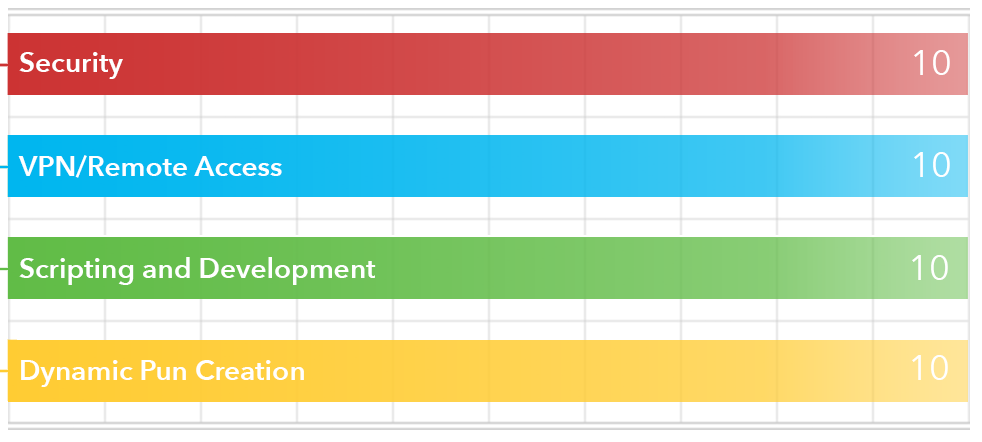
<style>
.page{position:relative;width:982px;height:442px;background:#ffffff}
.page>*{position:absolute;margin:0}
.t1{font:28px "AvenirNext-DemiBold";color:#ffffff}
.t2{font:36px "AvenirNext-Regular";color:#ffffff}
</style>
<div class="page">
<p class="t1" style="left:19px;top:52px;width:104px;height:27px">Security</p>
<p class="t2" style="left:914px;top:50px;width:36px;height:25px">10</p>
<p class="t1" style="left:18px;top:155px;width:264px;height:23px">VPN/Remote Access</p>
<p class="t2" style="left:914px;top:152px;width:36px;height:25px">10</p>
<p class="t1" style="left:19px;top:257px;width:357px;height:28px">Scripting and Development</p>
<p class="t2" style="left:912px;top:255px;width:36px;height:25px">10</p>
<p class="t1" style="left:21px;top:360px;width:283px;height:27px">Dynamic Pun Creation</p>
<p class="t2" style="left:912px;top:355px;width:36px;height:25px">10</p>
</div>
